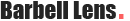
<style>
.page{position:relative;width:130px;height:21px;background:#ffffff}
.page>*{position:absolute;margin:0}
.t1{font:23px "Impact";color:#252525}
.t2{font:30px "Impact";color:#fc6060}
</style>
<div class="page">
<p class="t1" style="left:0px;top:1px;width:124px;height:18px">Barbell Lens <span class="t2">.</span></p>
</div>
